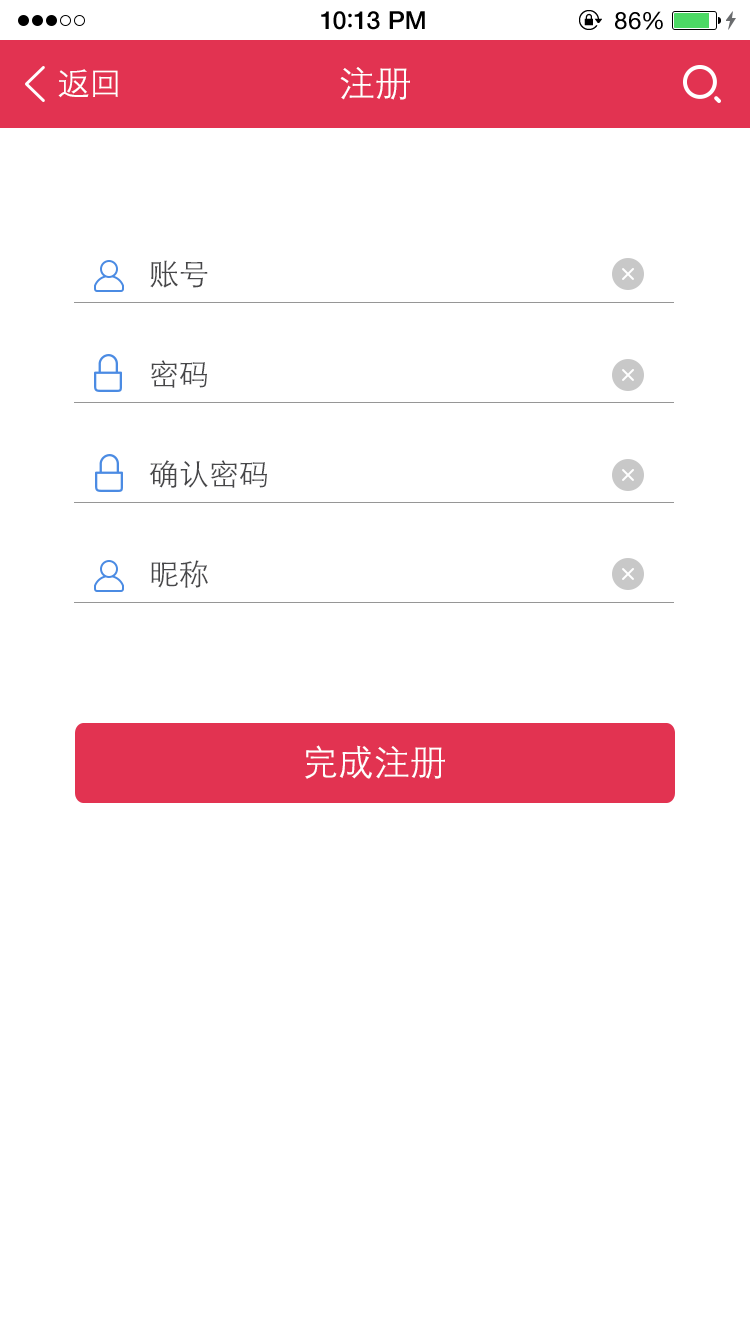
<style>
.page{position:relative;width:750px;height:1334px;background:#ffffff}
.page>*{position:absolute;margin:0}
.t1{font:25px "HelveticaNeue-Medium";letter-spacing:0.015em;color:#000000}
.t2{font:25px "ArialRoundedMTBold";letter-spacing:0.015em;color:#000000}
.t3{font:24px "HelveticaNeue";letter-spacing:0.03em;color:#000000}
.t4{font:33px "STXihei";color:#ffffff}
.t5{font:36px "STXihei";color:#ffffff}
.t6{font:30px "STXihei";color:#474749}
</style>
<div class="page">
<p class="t1" style="left:321px;top:11px;width:104px;height:19px">10<span class="t2">:</span>13 PM</p>
<p class="t3" style="left:615px;top:11px;width:48px;height:19px">86%</p>
<p class="t4" style="left:58px;top:69px;width:60px;height:29px">返回</p>
<p class="t5" style="left:340px;top:67px;width:70px;height:33px">注册</p>
<p class="t6" style="left:150px;top:260px;width:58px;height:28px">账号</p>
<p class="t6" style="left:150px;top:360px;width:57px;height:28px">密码</p>
<p class="t6" style="left:149px;top:460px;width:118px;height:28px">确认密码</p>
<p class="t6" style="left:151px;top:560px;width:57px;height:28px">昵称</p>
<p class="t5" style="left:305px;top:745px;width:140px;height:34px">完成注册</p>
</div>
